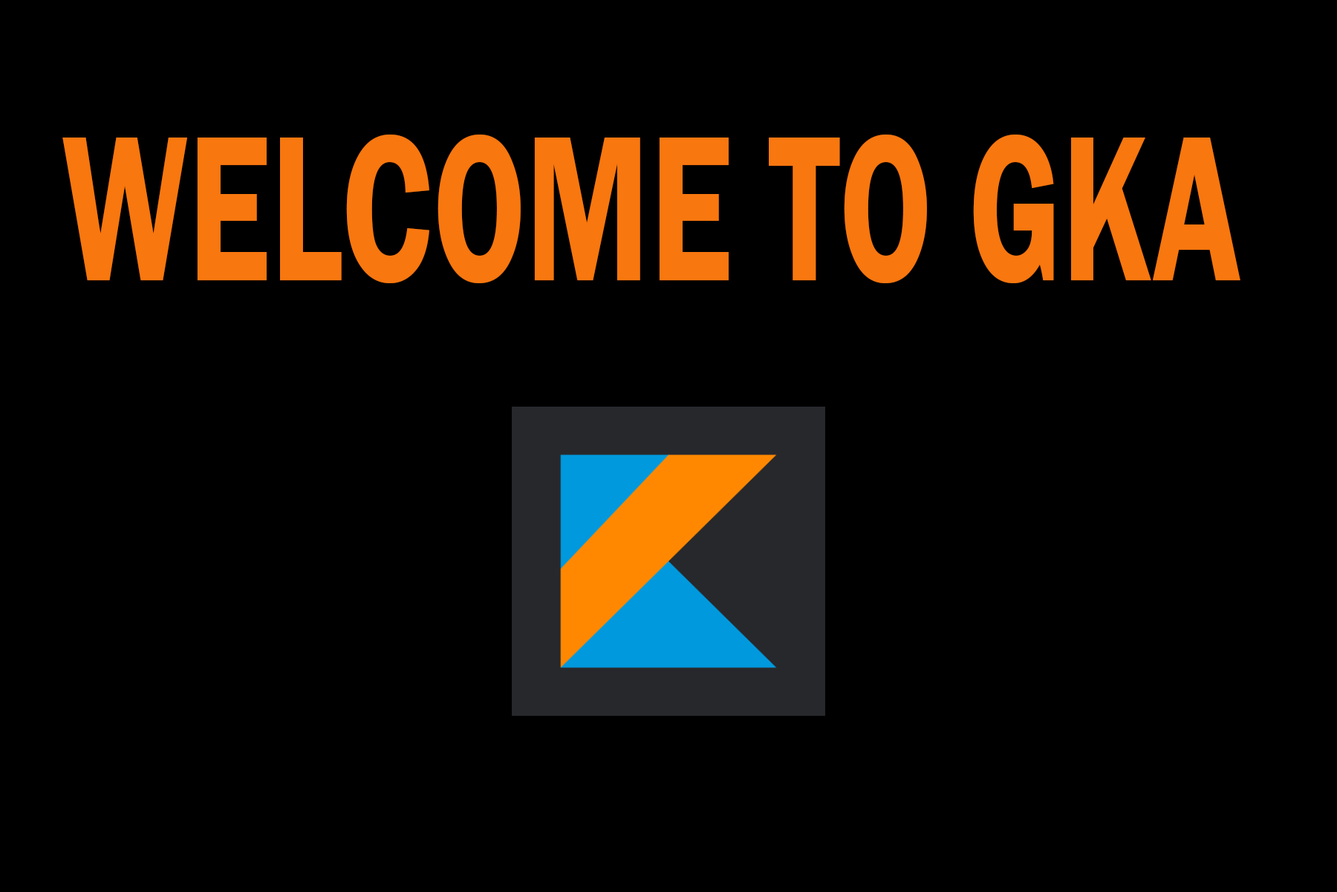
<style>
.page{position:relative;width:1337px;height:892px;background:#000000}
.page>*{position:absolute;margin:0}
.t1{font:214.2px "FranklinGothic-Demi";color:#f8770f;scale:0.68 1}
</style>
<div class="page">
<p class="t1" style="left:62px;top:134px;width:1179px;height:149px">WELCOME TO GKA</p>
</div>
